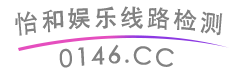
<style>
.page{position:relative;width:244px;height:77px;background:#ffffff}
.page>*{position:absolute;margin:0}
.t1{font:24px "STHeitiTC-Medium";letter-spacing:0.115em;color:#818181}
</style>
<div class="page">
<p class="t1" style="left:15px;top:6px;width:208px;height:30px">怡和娱乐线路检测</p>
<p class="t1" style="left:59px;top:44px;width:115px;height:24px">0146.CC</p>
</div>
